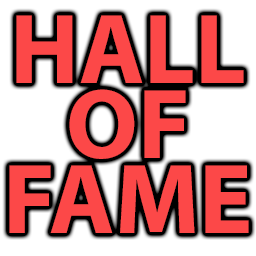
<style>
.page{position:relative;width:256px;height:256px;background:#ffffff}
.page>*{position:absolute;margin:0}
.t1{font:100px/75px "MyriadPro-Bold";color:#fc4848}
</style>
<div class="page">
<p class="t1" style="left:9px;top:15px;width:240px;height:218px;text-align:center">HALL<br>OF<br>FAME</p>
</div>
